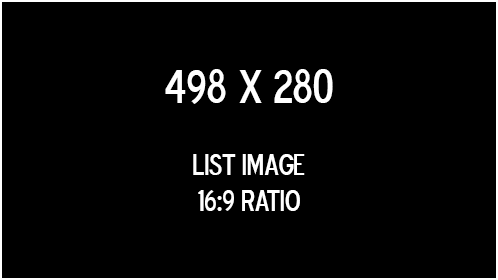
<style>
.page{position:relative;width:498px;height:280px;background:#000000}
.page>*{position:absolute;margin:0}
.t1{font:30px "BlueHighwayDType";color:#ffffff}
.t2{font:48px "BlueHighwayDType";color:#ffffff}
</style>
<div class="page">
<p class="t1" style="left:165px;top:69px;width:168px;height:142px;text-align:center"><span class="t2">498 x 280<br></span><br>LIST IMAGE<br>16:9 RATIO</p>
</div>
